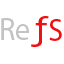
<style>
.page{position:relative;width:64px;height:64px;background:#ffffff}
.page>*{position:absolute;margin:0}
.t1{font:32.4px "MyriadPro-Regular";color:#c3c3c3;scale:0.94 1}
.t2{font:32.4px "MyriadPro-Regular";color:#f11010;scale:0.94 1}
</style>
<div class="page">
<p class="t1" style="left:1px;top:18px;width:28px;height:22px">Re</p>
<p class="t2" style="left:49px;top:19px;width:13px;height:22px">S</p>
</div>
